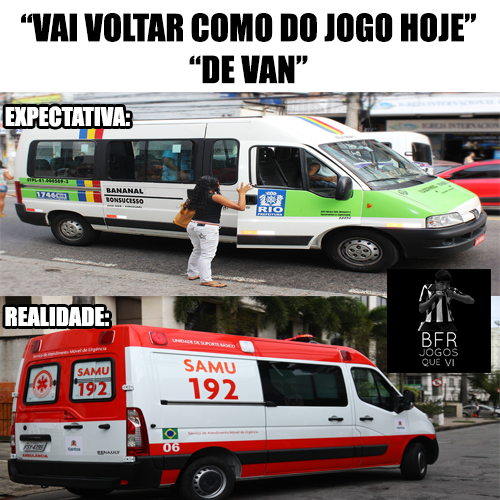
<style>
.page{position:relative;width:500px;height:500px}
.page>*{position:absolute;margin:0}
.t1{font:34.9px "Impact";color:#000000}
.t2{font:24px "Impact";color:#ffffff}
</style>
<div class="page">
<p class="t1" style="left:21px;top:13px;width:455px;height:71px;text-align:center">“VAI VOLTAR COMO DO JOGO HOJE”<br>“DE VAN”</p>
<p class="t2" style="left:5px;top:106px;width:125px;height:21px">EXPECTATIVA:</p>
<p class="t2" style="left:5px;top:307px;width:104px;height:19px">REALIDADE:</p>
</div>
